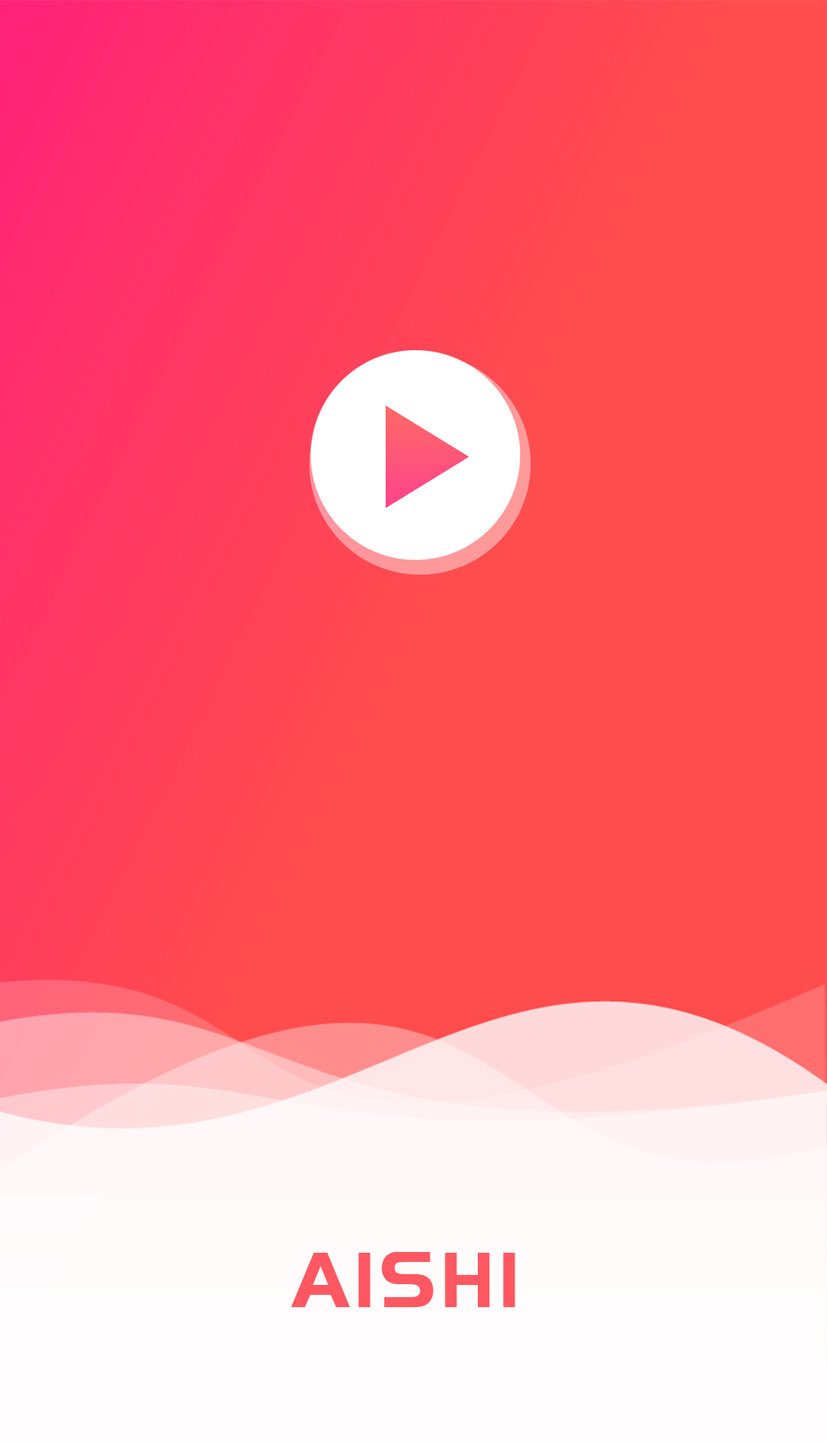
<style>
.page{position:relative;width:827px;height:1442px;background:#ff4d4d}
.page>*{position:absolute;margin:0}
.t1{font:81.7px "PangMenZhengDao";letter-spacing:0.04em;color:#ff5862}
</style>
<div class="page">
<p class="t1" style="left:291px;top:1252px;width:224px;height:55px">AISHI</p>
</div>
